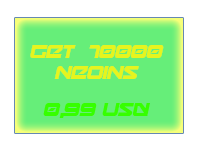
<style>
.page{position:relative;width:200px;height:150px;background:#66ee79}
.page>*{position:absolute;margin:0}
.t1{font:18px "Onky-Italic";color:#e6f41e}
.t2{font:18px "Onky-Italic";color:#36ff00}
</style>
<div class="page">
<p class="t1" style="left:30px;top:45px;width:134px;height:34px;text-align:center">Get  10000<br>neoins</p>
<p class="t2" style="left:43px;top:103px;width:107px;height:15px">0,99 usd</p>
</div>
